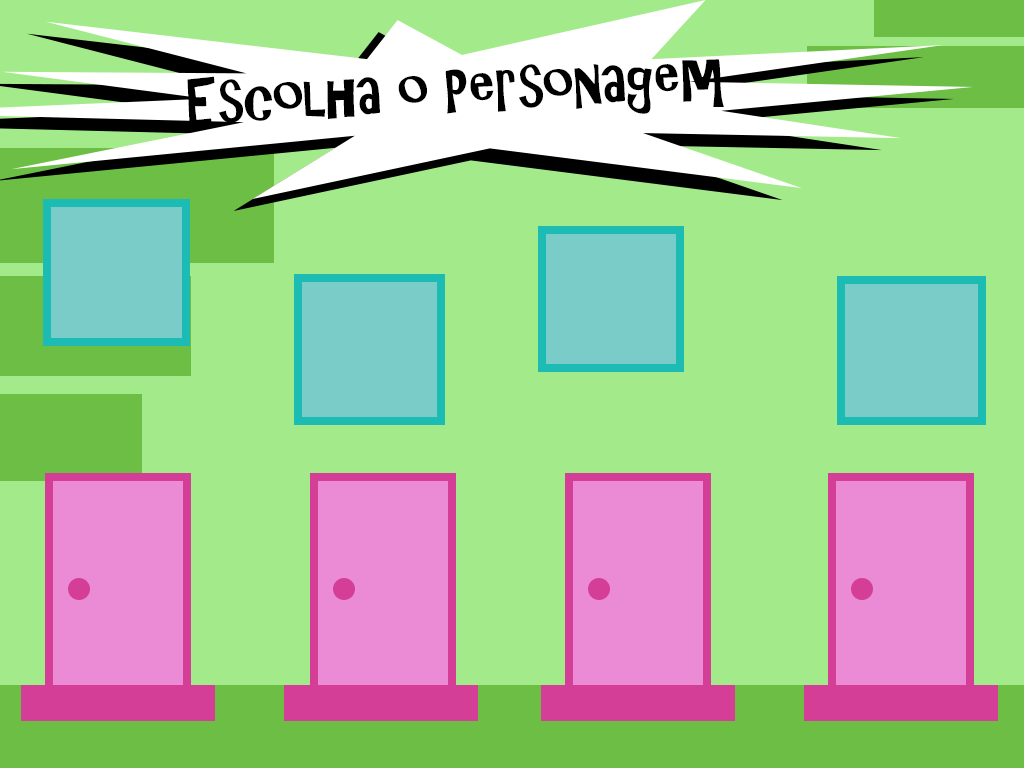
<style>
.page{position:relative;width:1024px;height:768px;background:#a3eb8a}
.page>*{position:absolute;margin:0}
.t1{font:58.3px "ARCHRISTY";color:#000000}
</style>
<div class="page">
<p class="t1" style="left:187px;top:59px;width:537px;height:67px;rotate:-3deg">Escolha o Personagem</p>
</div>
